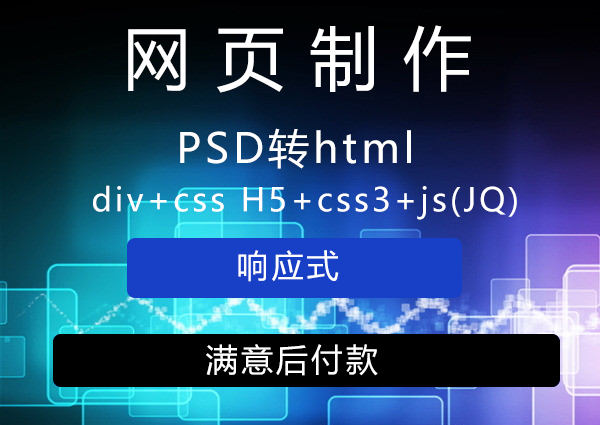
<style>
.page{position:relative;width:600px;height:425px}
.page>*{position:absolute;margin:0}
.t1{font:69px "MicrosoftYaHei";letter-spacing:0.355em;color:#ffffff}
.t2{font:41px "MicrosoftYaHei";letter-spacing:0.095em;color:#ffffff}
.t3{font:32px "MicrosoftYaHei";letter-spacing:0.095em;color:#ffffff}
</style>
<div class="page">
<p class="t1" style="left:128px;top:25px;width:343px;height:68px">网页制作</p>
<p class="t2" style="left:180px;top:128px;width:231px;height:41px">PSD转html</p>
<p class="t3" style="left:93px;top:185px;width:424px;height:35px">div+css H5+css3+js(JQ)</p>
<p class="t3" style="left:238px;top:250px;width:101px;height:32px">响应式</p>
<p class="t3" style="left:206px;top:344px;width:172px;height:32px">满意后付款</p>
</div>
